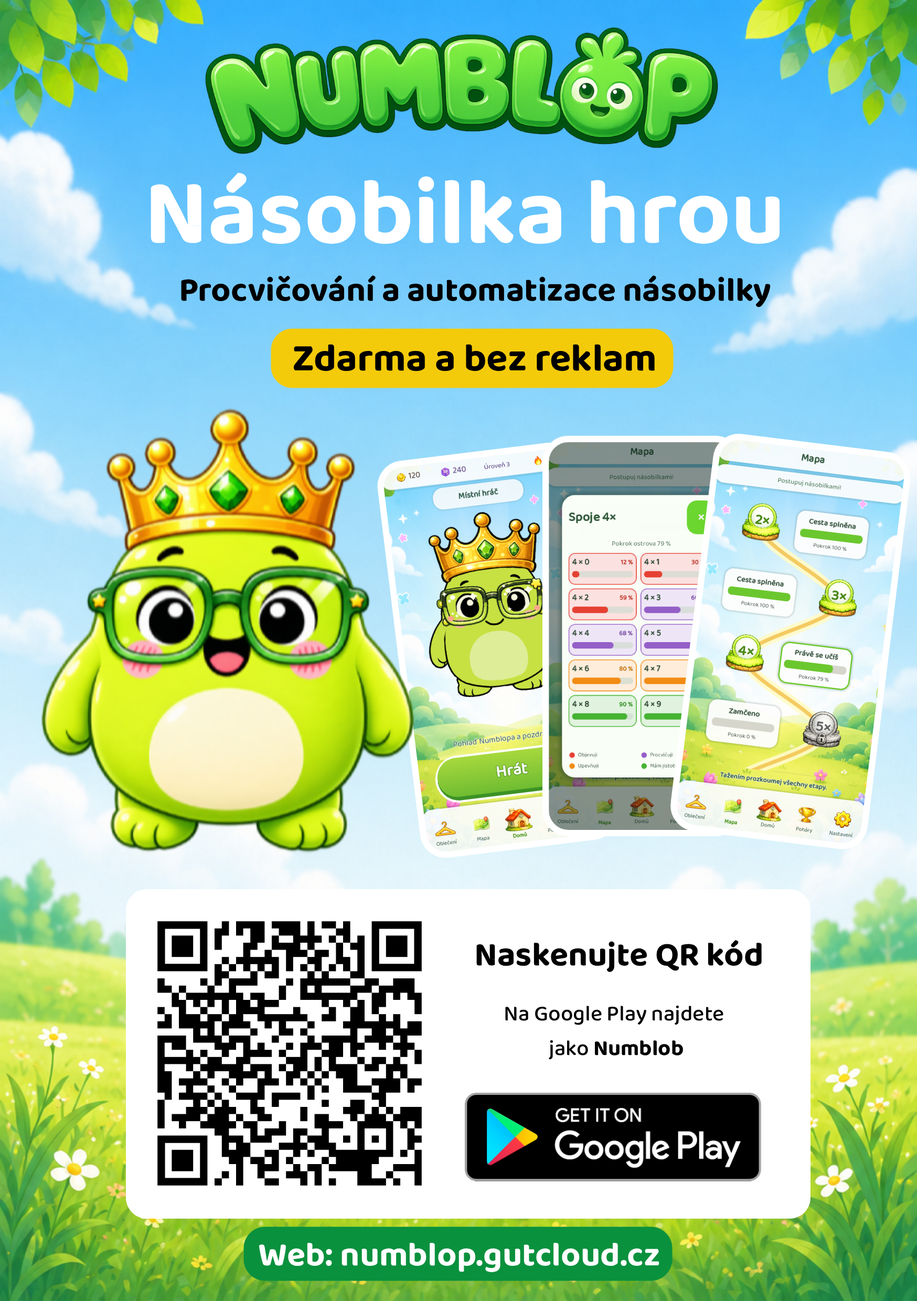
<style>
.page{position:relative;width:917px;height:1301px}
.page>*{position:absolute;margin:0}
.t1{font:94.4px "Baloo2-Bold";color:#ffffff}
.t2{font:34.1px "Baloo2-Bold";color:#000000}
.t3{font:39.3px "Baloo2-Bold";color:#000000}
.t4{font:22px "Baloo2-Medium";color:#000000}
.t5{font:22px "Baloo2-Bold";color:#000000}
.t6{font:34.1px "Baloo2-Bold";color:#ffffff}
</style>
<div class="page">
<p class="t1" style="left:151px;top:173px;width:629px;height:71px">Násobilka hrou</p>
<p class="t2" style="left:181px;top:275px;width:589px;height:32px">Procvičování a automatizace násobilky</p>
<p class="t3" style="left:293px;top:344px;width:362px;height:27px">Zdarma a bez reklam</p>
<p class="t2" style="left:476px;top:940px;width:286px;height:32px">Naskenujte QR kód</p>
<p class="t4" style="left:505px;top:1005px;width:218px;height:20px">Na Google Play najdete</p>
<p class="t5" style="left:549px;top:1039px;width:134px;height:20px"><span class="t4">jako </span>Numblob</p>
<p class="t6" style="left:259px;top:1242px;width:400px;height:30px">Web: numblop.gutcloud.cz</p>
</div>
